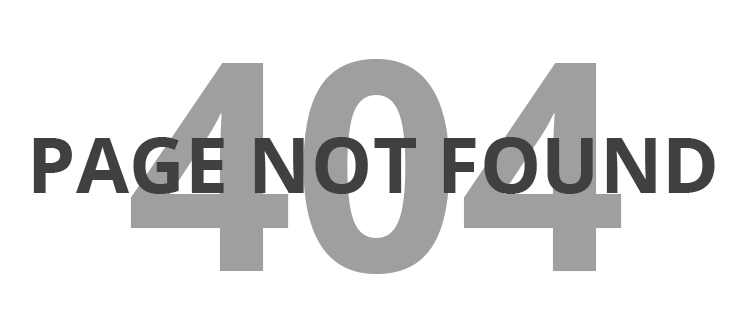
<style>
.page{position:relative;width:750px;height:336px;background:#ffffff}
.page>*{position:absolute;margin:0}
.t1{font:292px "OpenSans-Bold";color:#9f9f9f}
.t2{font:77.2px "OpenSans-Bold";color:#404040}
</style>
<div class="page">
<p class="t1" style="left:130px;top:59px;width:492px;height:215px">404</p>
<p class="t2" style="left:33px;top:137px;width:682px;height:57px">PAGE NOT FOUND</p>
</div>
